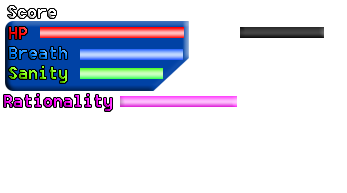
<style>
.page{position:relative;width:347px;height:193px;background:#ffffff}
.page>*{position:absolute;margin:0}
.t1{font:18px "8514oem";color:#ffffff}
.t2{font:18px "8514oem"}
</style>
<div class="page">
<p class="t1" style="left:8px;top:6px;width:48px;height:12px">Score</p>
<p class="t2" style="left:9px;top:27px;width:18px;height:12px">HP</p>
<p class="t2" style="left:9px;top:47px;width:58px;height:12px">Breath</p>
<p class="t2" style="left:9px;top:66px;width:58px;height:17px">Sanity</p>
<p class="t2" style="left:4px;top:94px;width:108px;height:17px">Rationality</p>
</div>
